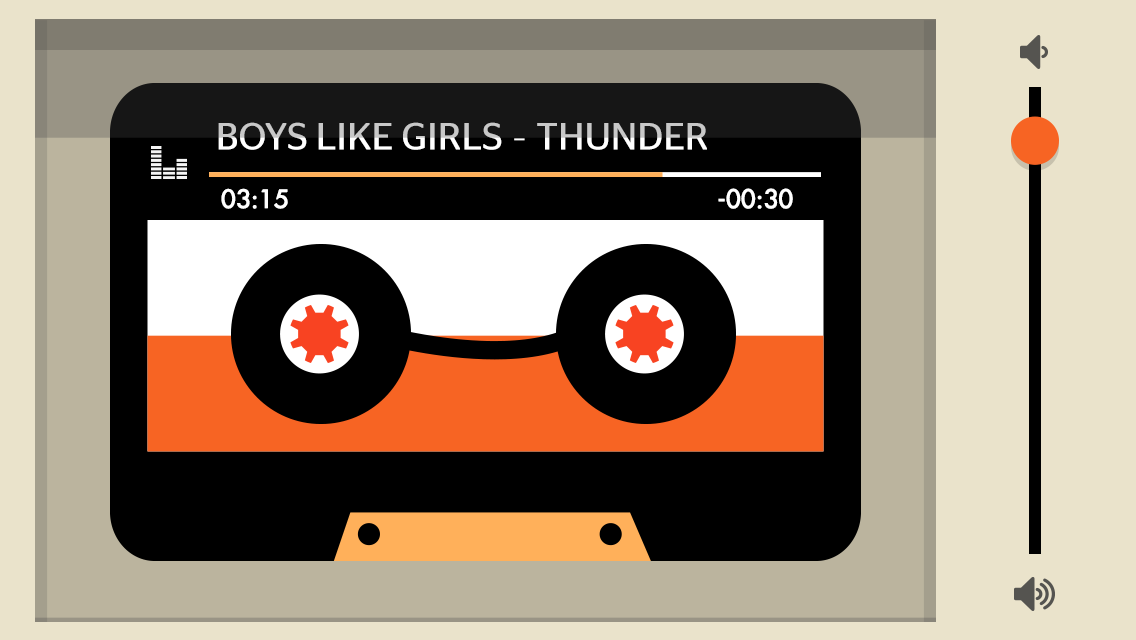
<style>
.page{position:relative;width:1136px;height:640px;background:#000000}
.page>*{position:absolute;margin:0}
.t1{font:37.9px "VNFStagSansBook";text-transform:uppercase}
.t2{font:24.3px "VNF-Futura";color:#ffffff;text-transform:uppercase;font-weight:bold}
.t3{font:24.7px "VNF-Futura";color:#ffffff;text-transform:uppercase;font-weight:bold}
</style>
<div class="page">
<p class="t1" style="left:218px;top:122px;width:489px;height:28px">Boys like Girls - Thunder</p>
<p class="t2" style="left:221px;top:188px;width:67px;height:21px">03:15</p>
<p class="t3" style="left:718px;top:188px;width:75px;height:21px">-00:30</p>
</div>
